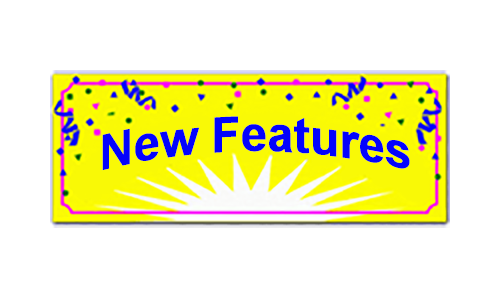
<style>
.page{position:relative;width:500px;height:300px;background:#ffffff}
.page>*{position:absolute;margin:0}
.t1{font:48px "Arial-BoldMT";color:#0403fc}
</style>
<div class="page">
<p class="t1" style="left:102px;top:116px;width:308px;height:55px">New Features</p>
</div>
